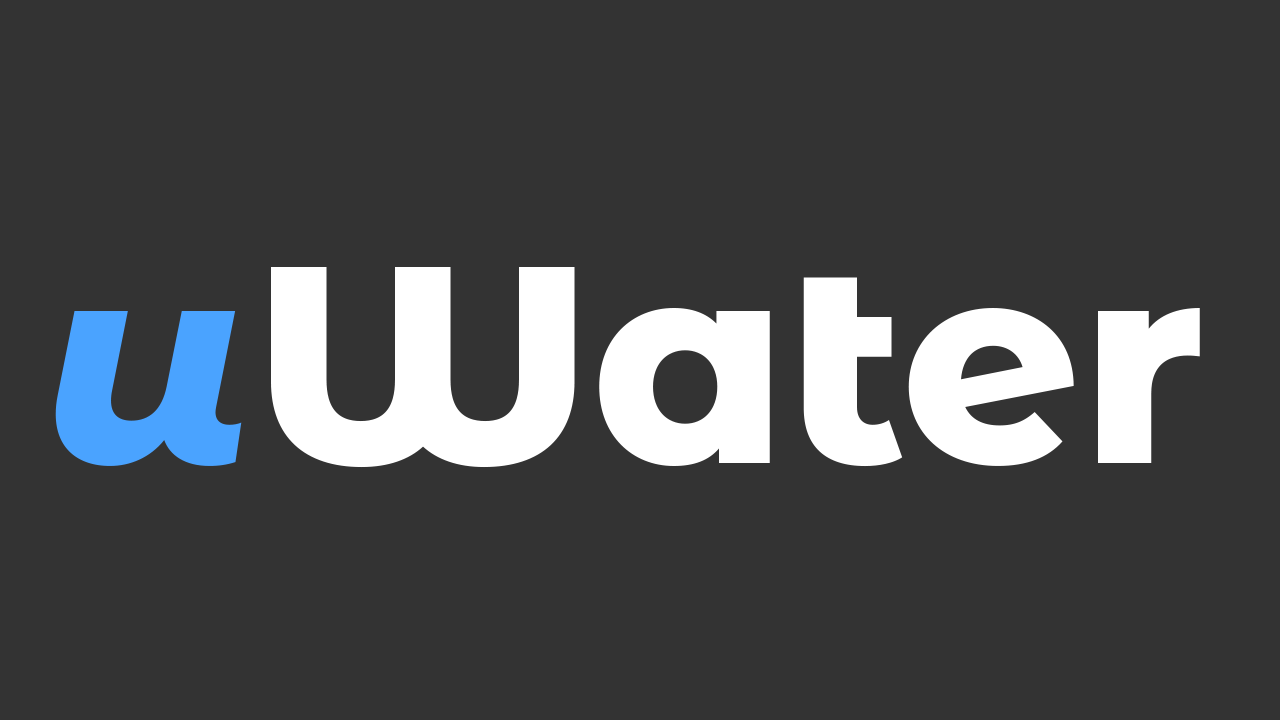
<style>
.page{position:relative;width:1280px;height:720px;background:#333333}
.page>*{position:absolute;margin:0}
.t1{font:280px "MontserratAlternates-ExtraBold";color:#ffffff}
.t2{font:280px "MontserratAlternates-ExtraBoldItalic";color:#4aa3ff}
</style>
<div class="page">
<p class="t1" style="left:55px;top:267px;width:1145px;height:201px"><span class="t2">u</span>Water</p>
</div>
